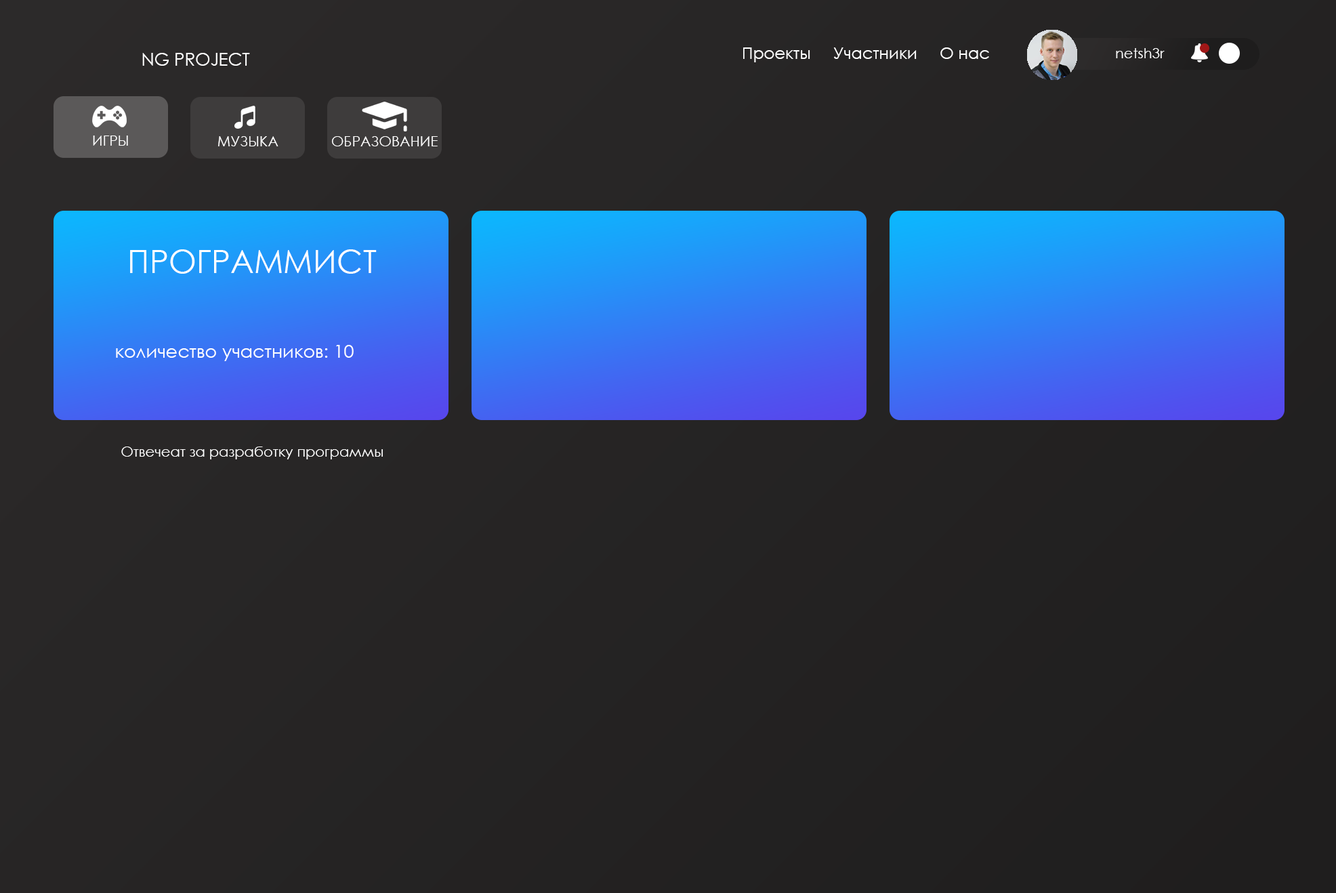
<style>
.page{position:relative;width:1336px;height:893px}
.page>*{position:absolute;margin:0}
.t1{font:17.4px "CenturyGothic";color:#ffffff}
.t2{font:16.3px "CenturyGothic";color:#ffffff}
.t3{font:14.2px "CenturyGothic";color:#ffffff}
.t4{font:32.1px "CenturyGothic";color:#ffffff}
.t5{font:18.3px "CenturyGothic";color:#ffffff}
</style>
<div class="page">
<p class="t1" style="left:142px;top:53px;width:108px;height:13px">NG PROJECT</p>
<p class="t2" style="left:743px;top:47px;width:246px;height:15px">Проекты     Участники     О нас</p>
<p class="t3" style="left:1116px;top:48px;width:48px;height:10px">netsh3r</p>
<p class="t3" style="left:93px;top:135px;width:35px;height:11px">ИГРЫ</p>
<p class="t3" style="left:218px;top:136px;width:60px;height:10px">МУЗЫКА</p>
<p class="t3" style="left:331px;top:136px;width:107px;height:10px">ОБРАЗОВАНИЕ</p>
<p class="t4" style="left:130px;top:249px;width:247px;height:25px">ПРОГРАММИСТ</p>
<p class="t5" style="left:116px;top:345px;width:238px;height:16px">количество участников: 10</p>
<p class="t3" style="left:121px;top:446px;width:262px;height:13px">Отвечеат за разработку программы</p>
</div>
